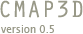
<style>
.page{position:relative;width:83px;height:34px;background:#ffffff}
.page>*{position:absolute;margin:0}
.t1{font:24px "OratorStd";color:#999988}
.t2{font:10px "LucidaGrande";color:#999988}
</style>
<div class="page">
<p class="t1" style="left:0px;top:0px;width:83px;height:18px">CMAP3D</p>
<p class="t2" style="left:1px;top:25px;width:53px;height:8px">version 0.5</p>
</div>
